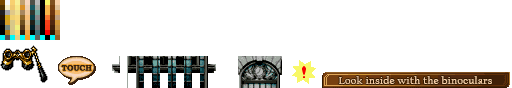
<style>
.page{position:relative;width:512px;height:88px;background:#ffffff}
.page>*{position:absolute;margin:0}
.t1{font:10.7px "CalifornianFB-Reg";letter-spacing:0.05em;color:#f8d0a8}
</style>
<div class="page">
<p class="t1" style="left:338px;top:76px;width:154px;height:8px">Look inside with the binoculars</p>
</div>
